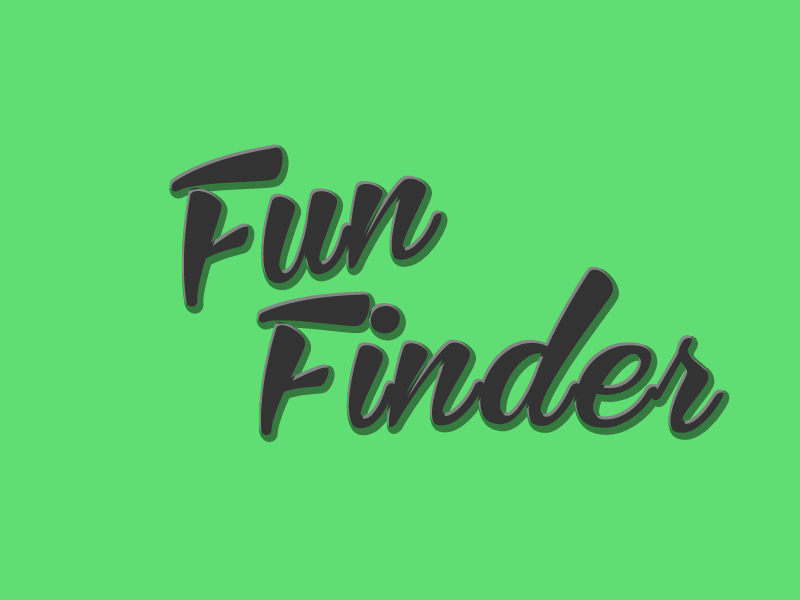
<style>
.page{position:relative;width:800px;height:600px;background:#60de73}
.page>*{position:absolute;margin:0}
.t1{font:170px "Bira-PERSONALUSEONLY";letter-spacing:0.05em;color:#333333;scale:0.93 1}
.t2{font:170px "Bira-PERSONALUSEONLY";letter-spacing:0.1em;color:#333333;scale:0.93 1}
</style>
<div class="page">
<p class="t1" style="left:169px;top:144px;width:273px;height:163px;rotate:-11deg">Fun</p>
<p class="t1" style="left:256px;top:266px;width:468px;height:169px"><span class="t2">F</span>inder</p>
</div>
